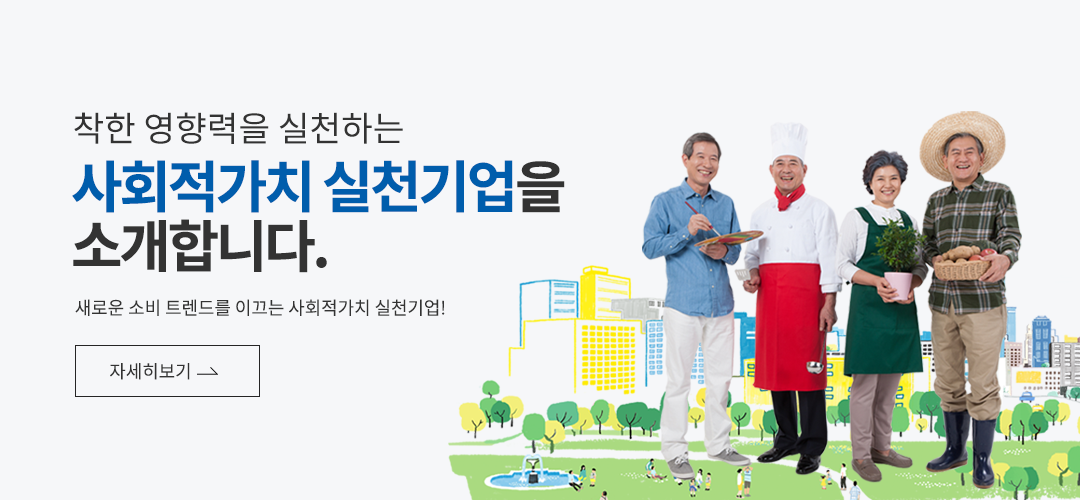
<style>
.page{position:relative;width:1080px;height:500px;background:#f6f7f9}
.page>*{position:absolute;margin:0}
.t1{font:34.5px "NotoSansCJKkr-DemiLight";color:#333333}
.t2{font:56.3px/59.5px "NotoSansCJKkr-Bold";letter-spacing:-0.06em;color:#005dac}
.t3{font:56.3px/59.5px "NotoSansCJKkr-Bold";letter-spacing:-0.06em;color:#333333}
.t4{font:18.2px "NotoSansCJKkr-DemiLight";color:#333333}
</style>
<div class="page">
<p class="t1" style="left:74px;top:112px;width:329px;height:32px">착한 영향력을 실천하는</p>
<p class="t2" style="left:72px;top:160px;width:493px;height:113px">사회적가치 실천기업<span class="t3">을<br>소개합니다.</span></p>
<p class="t4" style="left:75px;top:299px;width:370px;height:17px">새로운 소비 트렌드를 이끄는 사회적가치 실천기업!</p>
<p class="t4" style="left:110px;top:363px;width:80px;height:17px">자세히보기</p>
</div>
